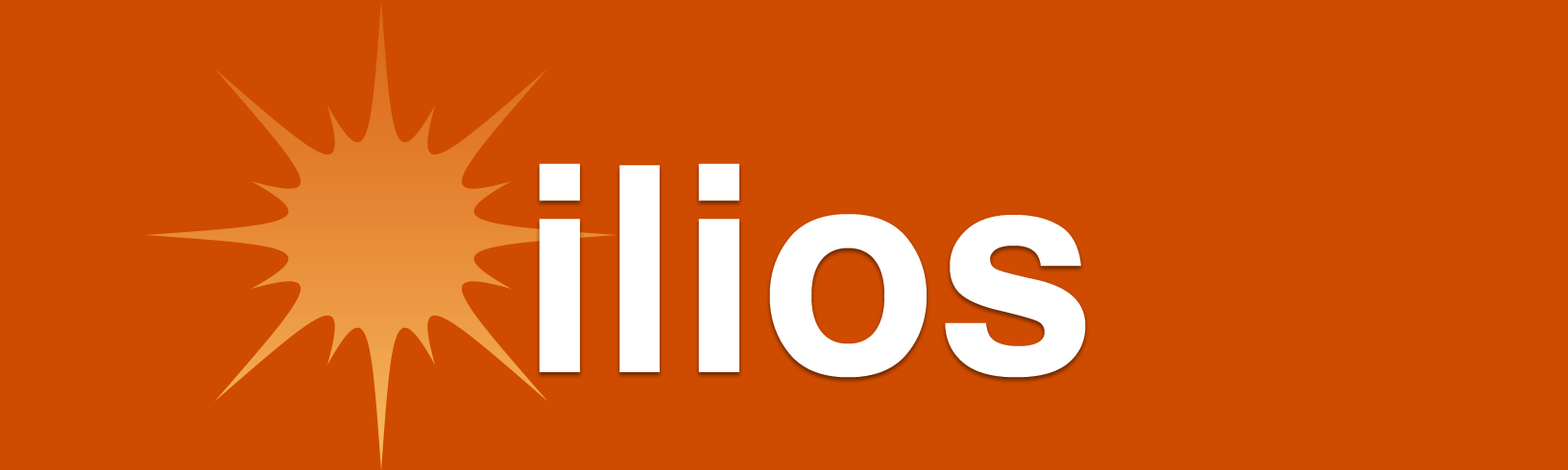
<style>
.page{position:relative;width:1568px;height:470px;background:#cf4b00}
.page>*{position:absolute;margin:0}
.t1{font:288.1px "Helvetica-Bold";color:#ffffff}
</style>
<div class="page">
<p class="t1" style="left:539px;top:163px;width:547px;height:215px">ilios</p>
</div>
